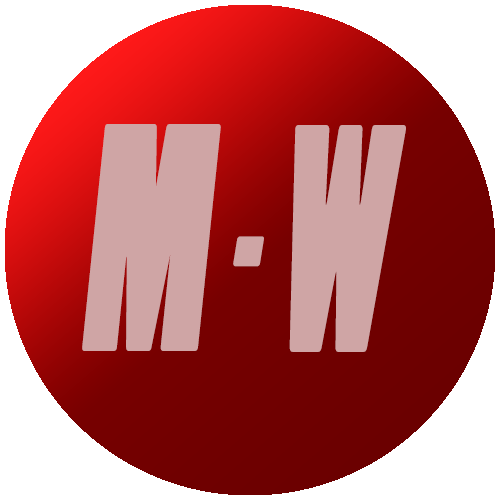
<style>
.page{position:relative;width:500px;height:500px;background:#ffffff}
.page>*{position:absolute;margin:0}
.t1{font:300.3px "PoplarStd";color:#d0a6a6;font-weight:bold;font-style:italic;scale:0.59 1}
.t2{font:300.3px "PoplarStd";color:#d0a6a6;font-weight:bold;font-style:italic;scale:0.58 1}
.t3{font:192.2px "PoplarStd";color:#d0a6a6;font-weight:bold;font-style:italic;scale:0.91 1}
</style>
<div class="page">
<p class="t1" style="left:82px;top:124px;width:139px;height:227px">M</p>
<p class="t2" style="left:289px;top:125px;width:117px;height:227px">W</p>
<p class="t3" style="left:233px;top:236px;width:31px;height:31px">.</p>
</div>
